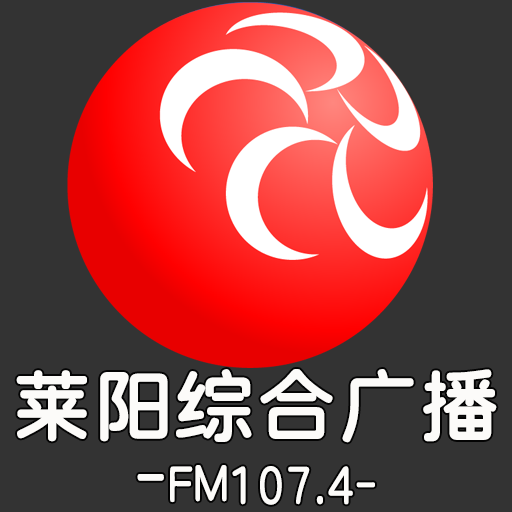
<style>
.page{position:relative;width:512px;height:512px;background:#333333}
.page>*{position:absolute;margin:0}
.t1{font:50px "SJyuantijian-C-Regular";letter-spacing:0.02em;color:#fcfbf9;scale:0.85 1}
.t2{font:80px "SJyuantijian-C-Regular";letter-spacing:0.02em;color:#fcfbf9}
.t3{font:72px "SJyuantijian-C-Regular";letter-spacing:0.02em;color:#fcfbf9;scale:0.85 1}
</style>
<div class="page">
<p class="t1" style="left:16px;top:369px;width:481px;height:136px"><span class="t2">莱阳综合广播</span><span class="t3">-</span>FM107.4-</p>
</div>
